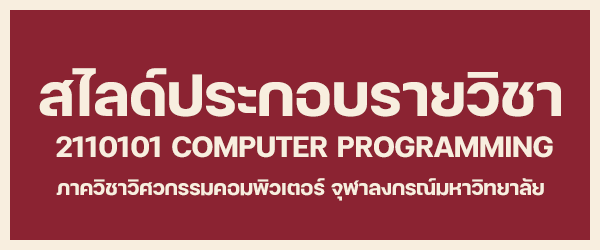
<style>
.page{position:relative;width:600px;height:250px;background:#8b2332}
.page>*{position:absolute;margin:0}
.t1{font:80px "FCMinimalBold";color:#f8eedf}
.t2{font:40px "FCMinimalBold";color:#f8eedf}
.t3{font:28px "FCMinimalBold";color:#f8eedf}
</style>
<div class="page">
<p class="t1" style="left:39px;top:68px;width:522px;height:49px">สไลด์ประกอบรายวิชา</p>
<p class="t2" style="left:56px;top:136px;width:497px;height:22px">2110101 COMPUTER PROGRAMMING</p>
<p class="t3" style="left:56px;top:178px;width:488px;height:23px">ภาควิชาวิศวกรรมคอมพิวเตอร์ จุฬาลงกรณ์มหาวิทยาลัย</p>
</div>
